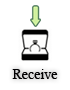
<style>
.page{position:relative;width:70px;height:90px;background:#ffffff}
.page>*{position:absolute;margin:0}
.t1{font:14px "TimesNewRomanPSMT";color:#010002}
</style>
<div class="page">
<p class="t1" style="left:12px;top:69px;width:46px;height:10px">Receive</p>
</div>
